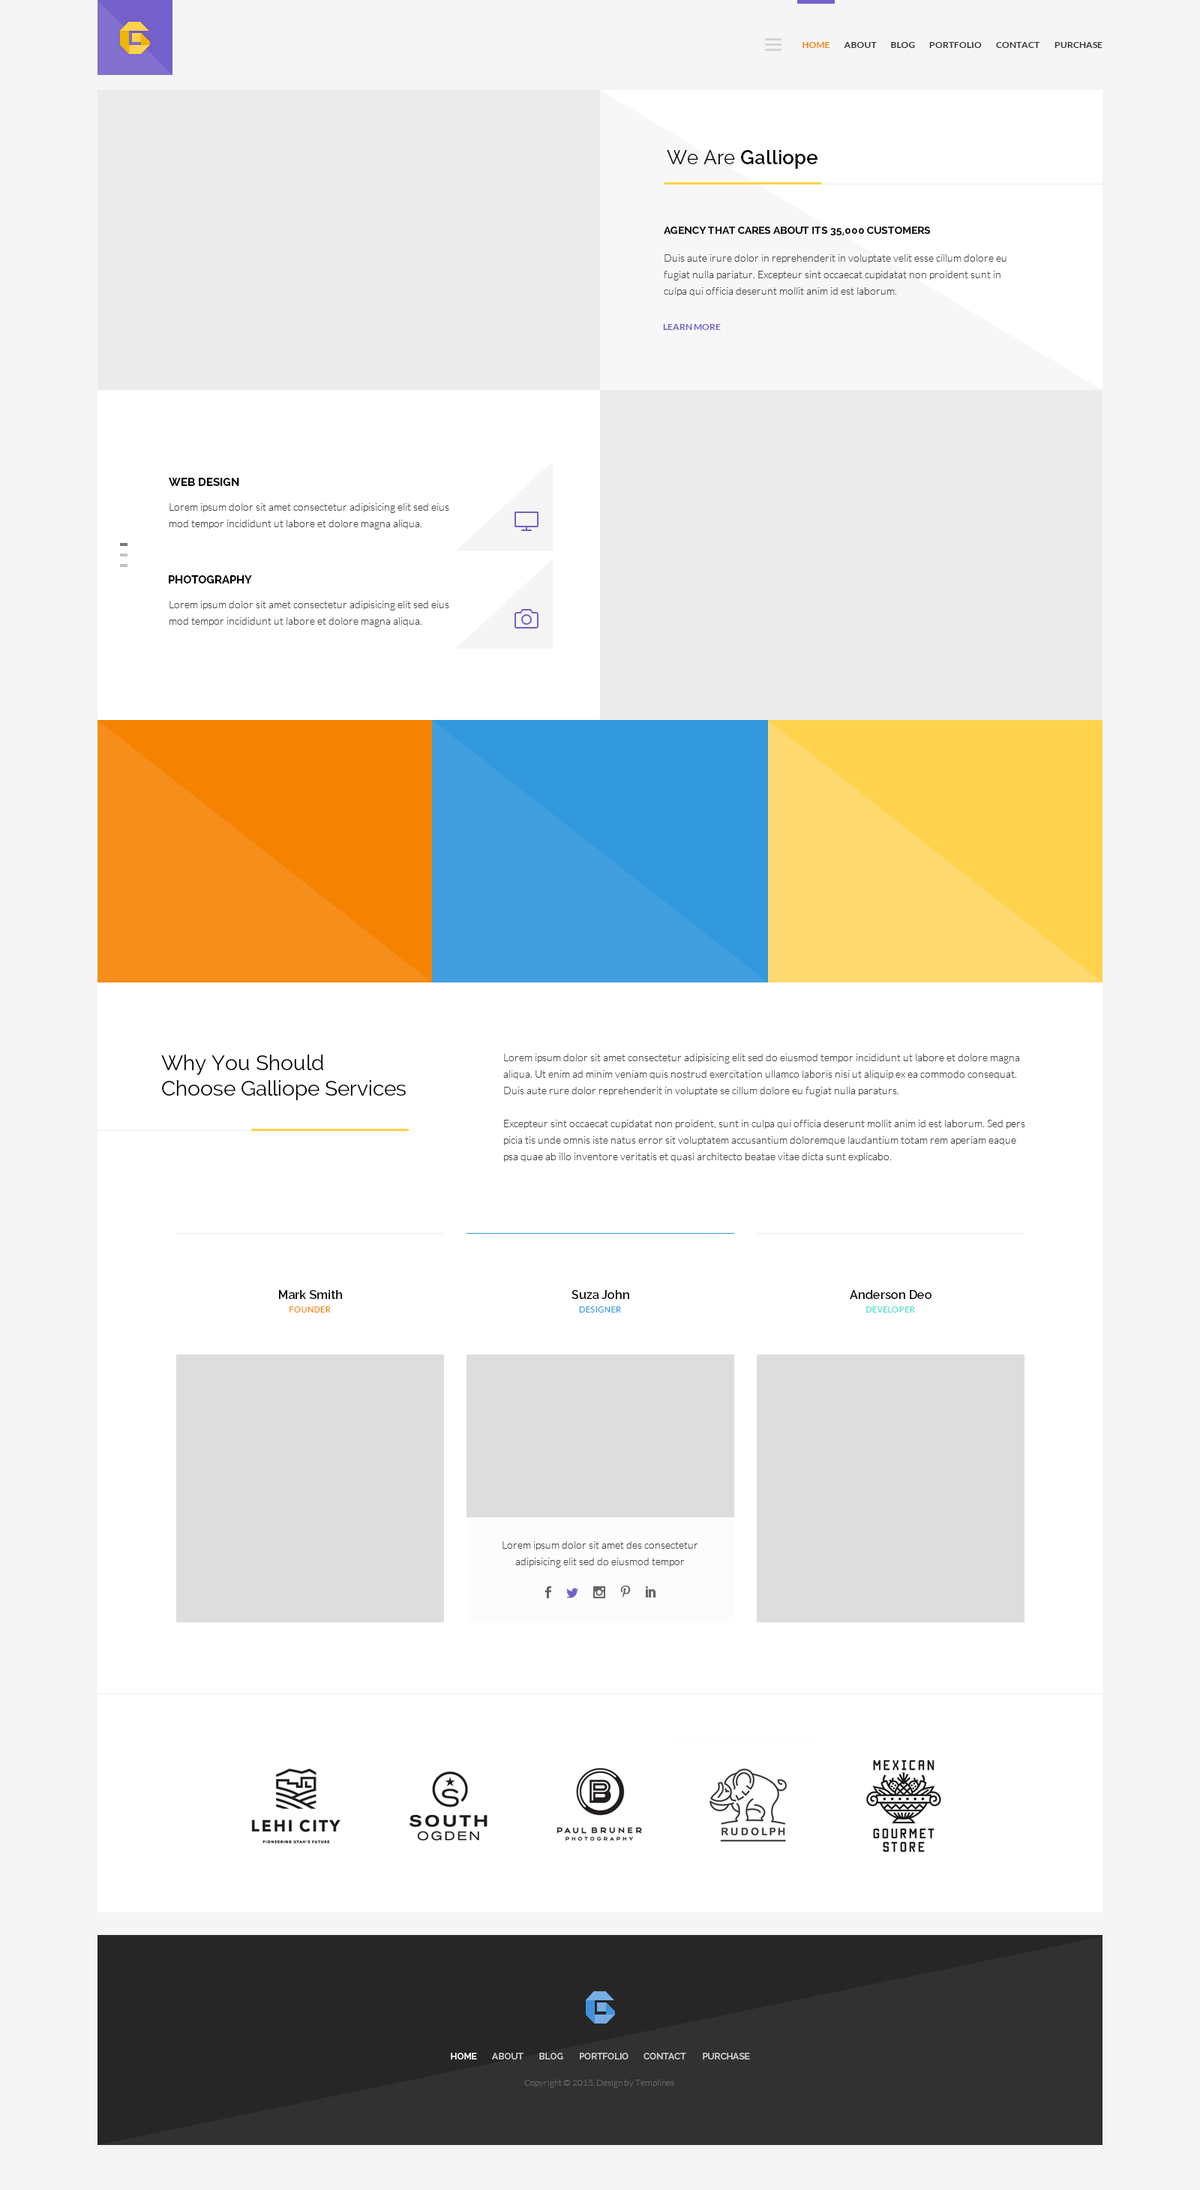
<style>
.page{position:relative;width:1200px;height:2190px;background:#ffffff}
.page>*{position:absolute;margin:0}
.t1{font:9px "Lato-Bold";color:#f58201}
.t2{font:9px "Lato-Bold";color:#333333}
.t3{font:19.5px "Raleway-SemiBold";color:#000000}
.t4{font:19.5px "Raleway-Regular";color:#000000}
.t5{font:10.5px "Raleway-Bold";color:#000000;text-transform:uppercase}
.t6{font:10.5px/16.5px "Lato-Light";color:#444444}
.t7{font:9px "Lato-Bold";color:#7460ca;text-transform:uppercase}
.t8{font:11.2px "Raleway-Bold";color:#000000;text-transform:uppercase}
.t9{font:21px/25.5px "Raleway-Regular";color:#000000}
.t10{font:12px "Raleway-SemiBold";color:#000000}
.t11{font:8.2px "Lato-Regular";letter-spacing:0.05em;color:#f58201;text-transform:uppercase}
.t12{font:8.2px "Lato-Regular";letter-spacing:0.05em;color:#3198de;text-transform:uppercase}
.t13{font:8.2px "Lato-Regular";letter-spacing:0.05em;color:#42dbcc;text-transform:uppercase}
.t14{font:9px "Raleway-SemiBold";color:#ffffff}
.t15{font:9px "Raleway-SemiBold";color:#cccccc}
.t16{font:9px "Lato-Light";color:#666666}
</style>
<div class="page">
<p class="t1" style="left:802px;top:42px;width:28px;height:6px">HOME</p>
<p class="t2" style="left:844px;top:42px;width:33px;height:6px">ABOUT</p>
<p class="t2" style="left:891px;top:42px;width:24px;height:6px">BLOG</p>
<p class="t2" style="left:929px;top:42px;width:53px;height:6px">PORTFOLIO</p>
<p class="t2" style="left:996px;top:42px;width:44px;height:6px">CONTACT</p>
<p class="t2" style="left:1054px;top:42px;width:48px;height:6px">PURCHASE</p>
<p class="t3" style="left:667px;top:150px;width:151px;height:19px"><span class="t4">We Are </span>Galliope</p>
<p class="t5" style="left:664px;top:226px;width:267px;height:10px">Agency That Cares About Its 35,000 Customers</p>
<p class="t6" style="left:664px;top:254px;width:342px;height:42px">Duis aute irure dolor in reprehenderit in voluptate velit esse cillum dolore eu<br>fugiat nulla pariatur. Excepteur sint occaecat cupidatat non proident sunt in<br>culpa qui officia deserunt mollit anim id est laborum.</p>
<p class="t7" style="left:663px;top:324px;width:58px;height:6px">Learn more</p>
<p class="t8" style="left:169px;top:478px;width:70px;height:8px">Web Design</p>
<p class="t6" style="left:170px;top:503px;width:279px;height:27px">Lorem ipsum dolor sit amet consectetur adipisicing elit sed eius<br>mod tempor incididunt ut labore et dolore magna aliqua.</p>
<p class="t8" style="left:169px;top:575px;width:83px;height:9px">Photography</p>
<p class="t6" style="left:170px;top:601px;width:279px;height:26px">Lorem ipsum dolor sit amet consectetur adipisicing elit sed eius<br>mod tempor incididunt ut labore et dolore magna aliqua.</p>
<p class="t9" style="left:161px;top:1054px;width:245px;height:46px">Why You Should<br>Choose Galliope Services</p>
<p class="t6" style="left:503px;top:1054px;width:522px;height:108px">Lorem ipsum dolor sit amet consectetur adipisicing elit sed do eiusmod tempor incididunt ut labore et dolore magna<br>aliqua. Ut enim ad minim veniam quis nostrud exercitation ullamco laboris nisi ut aliquip ex ea commodo consequat. <br>Duis aute rure dolor reprehenderit in voluptate se cillum dolore eu fugiat nulla paraturs.<br><br>Excepteur sint occaecat cupidatat non proident, sunt in culpa qui officia deserunt mollit anim id est laborum. Sed pers<br>picia tis unde omnis iste natus error sit voluptatem accusantium doloremque laudantium totam rem aperiam eaque<br>psa quae ab illo inventore veritatis et quasi architecto beatae vitae dicta sunt explicabo. <br>Nemo enim ipsam voluptatem quia voluptas sit aspernatur aut odit aut fugit, sed quia consequuntur magni dolores eos qui ratione voluptatem sequi nesciunt. Neque porro quisquam est, qui dolorem ipsum quia dolor sit amet, consectetur, adipisci velit, sed quia non numquam eius modi tempora incidunt ut labore et dolore magnam aliquam quaerat voluptatem.</p>
<p class="t10" style="left:279px;top:1290px;width:63px;height:9px">Mark Smith</p>
<p class="t10" style="left:572px;top:1290px;width:57px;height:9px">Suza John</p>
<p class="t10" style="left:850px;top:1290px;width:82px;height:9px">Anderson Deo</p>
<p class="t11" style="left:290px;top:1306px;width:41px;height:6px">Founder</p>
<p class="t12" style="left:579px;top:1306px;width:42px;height:6px">Designer</p>
<p class="t13" style="left:866px;top:1306px;width:49px;height:6px">developer</p>
<p class="t6" style="left:502px;top:1541px;width:196px;height:27px;text-align:center">Lorem ipsum dolor sit amet des consectetur<br>adipisicing elit sed do eiusmod tempor</p>
<p class="t14" style="left:451px;top:2053px;width:26px;height:7px">HOME</p>
<p class="t15" style="left:492px;top:2053px;width:32px;height:7px">ABOUT</p>
<p class="t15" style="left:539px;top:2053px;width:24px;height:7px">BLOG</p>
<p class="t15" style="left:580px;top:2053px;width:48px;height:7px">PORTFOLIO</p>
<p class="t15" style="left:644px;top:2053px;width:42px;height:7px">CONTACT</p>
<p class="t15" style="left:703px;top:2053px;width:47px;height:7px">PURCHASE</p>
<p class="t16" style="left:524px;top:2079px;width:150px;height:9px">Copyright © 2015. Design by Templines</p>
</div>
